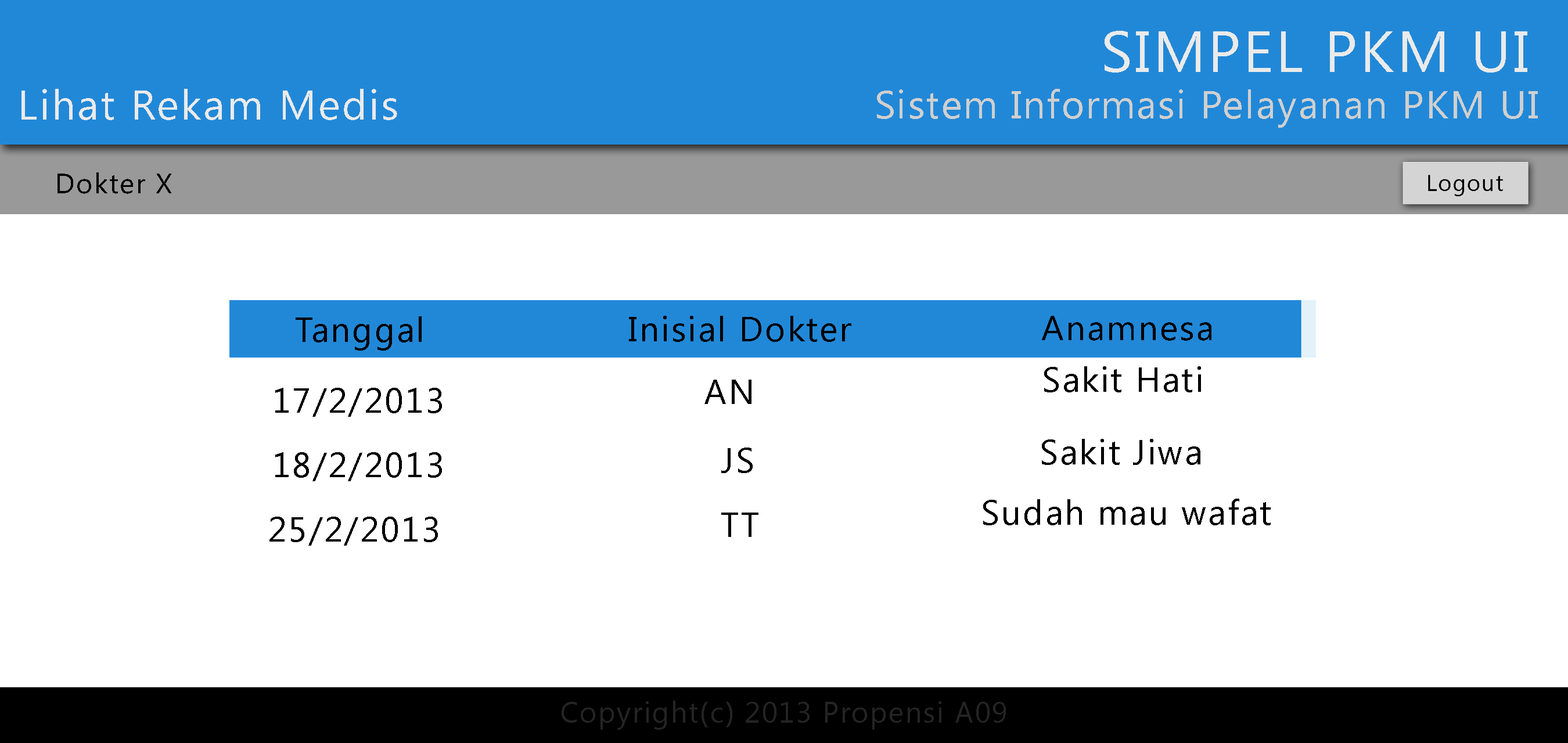
<style>
.page{position:relative;width:1568px;height:743px;background:#ffffff}
.page>*{position:absolute;margin:0}
.t1{font:58.1px "SegoeUI";letter-spacing:0.05em;color:#eaeaea}
.t2{font:41.8px "SegoeUI";letter-spacing:0.05em;color:#eaeaea}
.t3{font:38.7px "SegoeUI";letter-spacing:0.05em;color:#cfcfcf}
.t4{font:28px "SegoeUI";letter-spacing:0.05em;color:#000000}
.t5{font:34.8px "SegoeUI";letter-spacing:0.05em;color:#000000}
.t6{font:29px "SegoeUI";letter-spacing:0.05em;color:#242424}
</style>
<div class="page">
<p class="t1" style="left:1105px;top:31px;width:422px;height:42px">SIMPEL PKM UI</p>
<p class="t2" style="left:21px;top:89px;width:376px;height:31px">Lihat Rekam Medis</p>
<p class="t3" style="left:877px;top:89px;width:661px;height:39px">Sistem Informasi Pelayanan PKM UI</p>
<p class="t4" style="left:57px;top:172px;width:114px;height:22px">Dokter X</p>
<p class="t5" style="left:296px;top:317px;width:126px;height:34px">Tanggal</p>
<p class="t5" style="left:629px;top:316px;width:222px;height:26px">Inisial Dokter</p>
<p class="t5" style="left:1042px;top:316px;width:169px;height:25px">Anamnesa</p>
<p class="t5" style="left:1044px;top:366px;width:157px;height:27px">Sakit Hati</p>
<p class="t5" style="left:275px;top:388px;width:167px;height:29px">17/2/2013</p>
<p class="t5" style="left:704px;top:380px;width:47px;height:24px">AN</p>
<p class="t5" style="left:721px;top:448px;width:32px;height:25px">JS</p>
<p class="t5" style="left:1042px;top:439px;width:158px;height:26px">Sakit Jiwa</p>
<p class="t5" style="left:275px;top:452px;width:167px;height:29px">18/2/2013</p>
<p class="t5" style="left:983px;top:499px;width:288px;height:27px">Sudah mau wafat</p>
<p class="t5" style="left:269px;top:517px;width:169px;height:29px">25/2/2013</p>
<p class="t5" style="left:721px;top:513px;width:37px;height:24px">TT</p>
<p class="t6" style="left:562px;top:701px;width:444px;height:29px">Copyright(c) 2013 Propensi A09</p>
</div>
